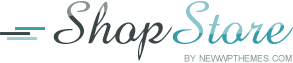
<style>
.page{position:relative;width:293px;height:63px;background:#ffffff}
.page>*{position:absolute;margin:0}
.t1{font:60px "AmazoneBT-Regular";color:#359da9}
.t2{font:60px "AmazoneBT-Regular";color:#3a4646}
.t3{font:9px "ArialMT";color:#809393;text-transform:uppercase}
</style>
<div class="page">
<p class="t1" style="left:53px;top:1px;width:240px;height:60px"><span class="t2">Shop</span>Store</p>
<p class="t3" style="left:184px;top:55px;width:108px;height:7px">by NewWpThemes.com</p>
</div>
